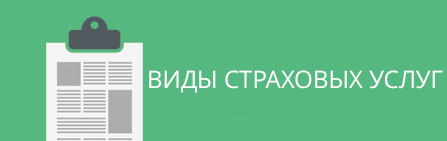
<style>
.page{position:relative;width:447px;height:141px;background:#55b881}
.page>*{position:absolute;margin:0}
.t1{font:24px "OpenSans";color:#ffffff}
</style>
<div class="page">
<p class="t1" style="left:149px;top:70px;width:294px;height:23px">ВИДЫ СТРАХОВЫХ УСЛУГ</p>
</div>
